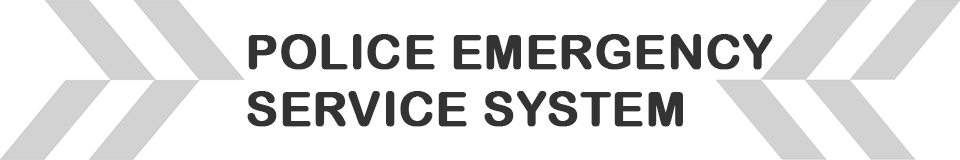
<style>
.page{position:relative;width:960px;height:160px;background:#ffffff}
.page>*{position:absolute;margin:0}
.t1{font:48px "ArialRoundedMTBold";letter-spacing:0.005em;color:#333333;text-transform:uppercase;font-weight:bold}
</style>
<div class="page">
<p class="t1" style="left:247px;top:34px;width:526px;height:93px">Police Emergency<br>Service System</p>
</div>
